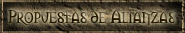
<style>
.page{position:relative;width:185px;height:33px}
.page>*{position:absolute;margin:0}
.t1{font:17px "Morpheus"}
</style>
<div class="page">
<p class="t1" style="left:8px;top:10px;width:168px;height:16px">Propuestas de Alianzas</p>
</div>
